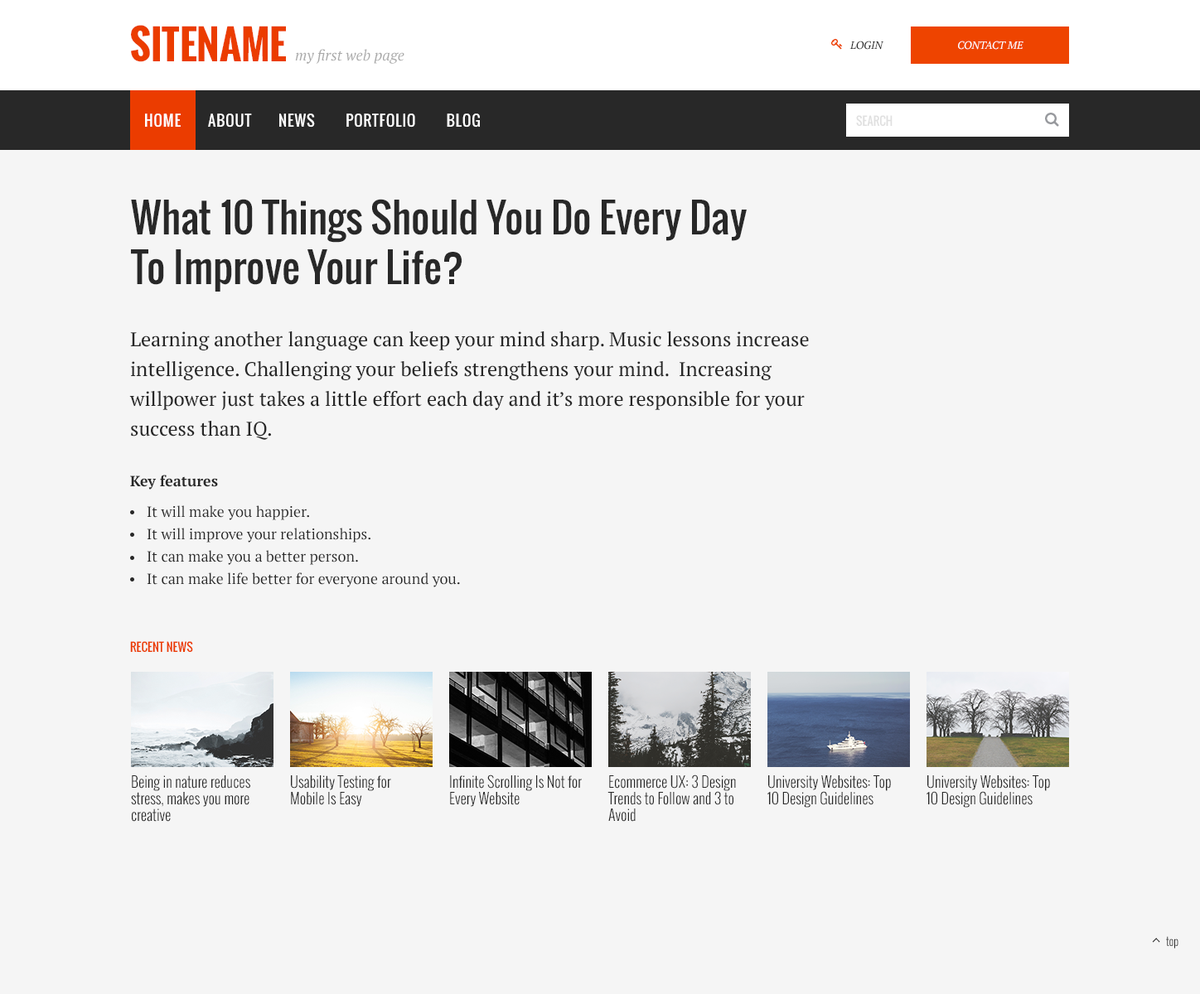
<style>
.page{position:relative;width:1200px;height:994px;background:#f5f5f5}
.page>*{position:absolute;margin:0}
.t1{font:39.8px "Oswald-Bold";color:#eb3c00;text-transform:uppercase}
.t2{font:10.8px "PTSerif-Italic";color:#282828;text-transform:uppercase}
.t3{font:10.8px "PTSerif-Italic";color:#ffffff;text-transform:uppercase}
.t4{font:14.9px "PTSerif-Italic";color:#aaaaaa}
.t5{font:14.9px "Oswald-Regular";letter-spacing:0.05em;color:#ffffff;text-transform:uppercase}
.t6{font:11.6px "Oswald-Regular";color:#e0e0e0;text-transform:uppercase}
.t7{font:39.8px/49.7px "Oswald-Regular";color:#282828}
.t8{font:19.9px/29.8px "PTSerif-Regular";color:#282828}
.t9{font:14.9px/22.4px "PTSerif-Regular";color:#282828}
.t10{font:14.9px/22.4px "PTSerif-Bold";color:#282828}
.t11{font:11.6px "Oswald-Regular";color:#eb3c00;text-transform:uppercase}
.t12{font:14.9px/16.6px "Oswald-Light";color:#282828}
.t13{font:11.6px "Oswald-Light";color:#282828}
</style>
<div class="page">
<p class="t1" style="left:131px;top:25px;width:155px;height:37px">Sitename</p>
<p class="t2" style="left:849px;top:41px;width:34px;height:9px">Login</p>
<p class="t3" style="left:958px;top:41px;width:65px;height:9px">contact me</p>
<p class="t4" style="left:295px;top:49px;width:109px;height:15px">my first web page</p>
<p class="t5" style="left:145px;top:113px;width:335px;height:15px">home       about       news        portfolio        blog</p>
<p class="t6" style="left:856px;top:115px;width:36px;height:11px">Search</p>
<p class="t7" style="left:131px;top:199px;width:615px;height:93px">What 10 Things Should You Do Every Day To Improve Your Life?</p>
<p class="t8" style="left:129px;top:331px;width:680px;height:109px">Learning another language can keep your mind sharp. Music lessons increase intelligence. Challenging your beliefs strengthens your mind.  Increasing willpower just takes a little effort each day and it’s more responsible for your success than IQ.</p>
<p class="t9" style="left:130px;top:475px;width:330px;height:112px"><span class="t10">Key features<br></span>It will make you happier.<br>It will improve your relationships.<br>It can make you a better person.<br>It can make life better for everyone around you.</p>
<p class="t11" style="left:130px;top:641px;width:63px;height:11px">Recent news</p>
<p class="t12" style="left:131px;top:775px;width:119px;height:47px">Being in nature reduces stress, makes you more creative</p>
<p class="t12" style="left:291px;top:775px;width:100px;height:32px">Usability Testing for Mobile Is Easy</p>
<p class="t12" style="left:450px;top:775px;width:132px;height:32px">Infinite Scrolling Is Not for Every Website</p>
<p class="t12" style="left:607px;top:775px;width:129px;height:47px">Ecommerce UX: 3 Design Trends to Follow and 3 to Avoid</p>
<p class="t12" style="left:767px;top:775px;width:124px;height:33px">University Websites: Top 10 Design Guidelines</p>
<p class="t12" style="left:926px;top:775px;width:124px;height:33px">University Websites: Top 10 Design Guidelines</p>
<p class="t13" style="left:1166px;top:936px;width:12px;height:13px">top</p>
</div>
